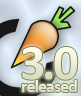
<style>
.page{position:relative;width:81px;height:96px}
.page>*{position:absolute;margin:0}
.t1{font:50px "Calibri-Bold";letter-spacing:-0.05em;color:#e9ecd3}
.t2{font:18px "Calibri-Bold";letter-spacing:-0.05em;color:#e6e9cf}
</style>
<div class="page">
<p class="t1" style="left:22px;top:47px;width:56px;height:33px;rotate:1deg">3.0</p>
<p class="t2" style="left:22px;top:80px;width:55px;height:12px">released</p>
</div>
